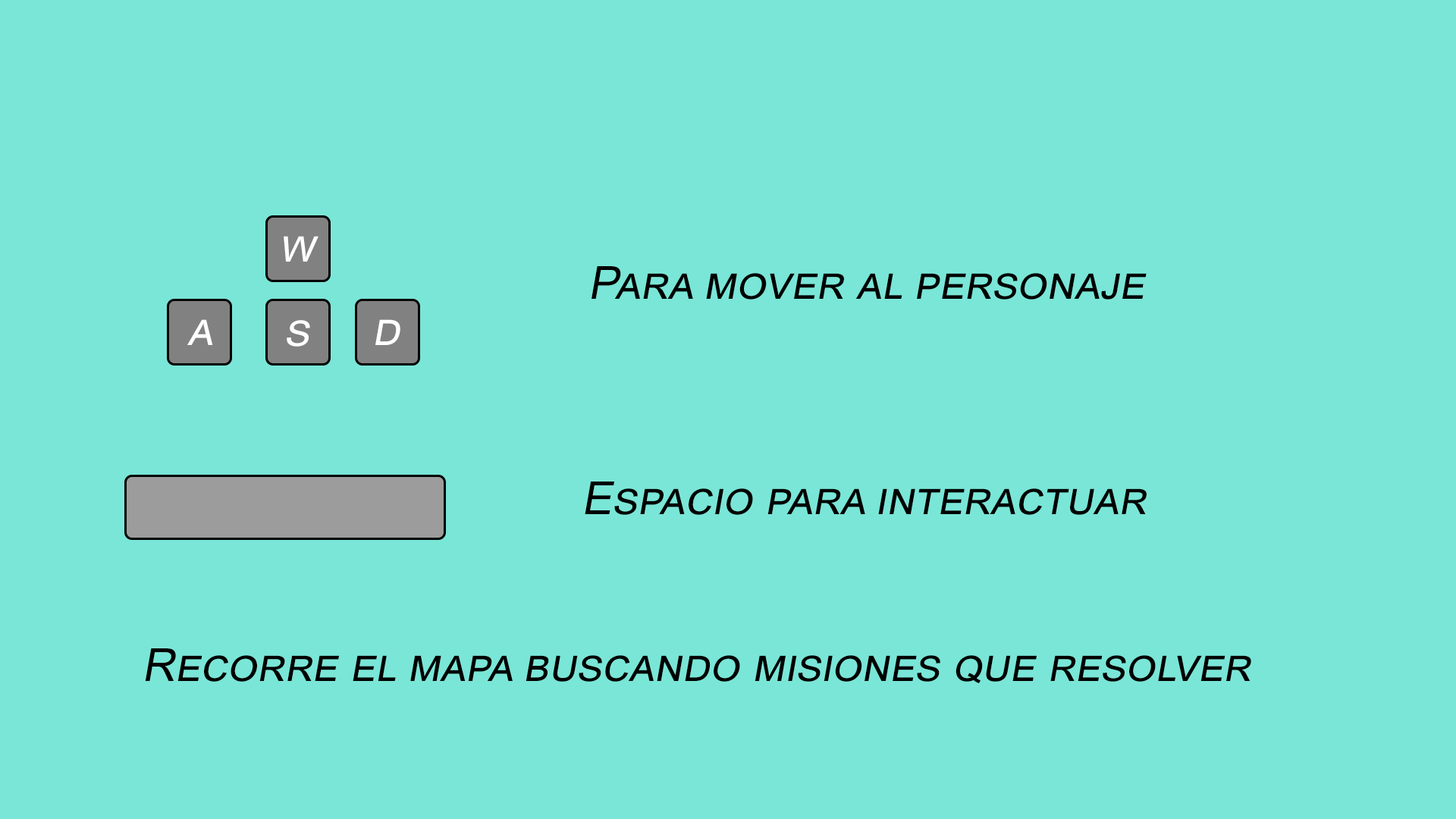
<style>
.page{position:relative;width:1456px;height:819px;background:#7ae6d7}
.page>*{position:absolute;margin:0}
.t1{font:45.5px "ArialMT";color:#ffffff;font-variant:small-caps;font-style:italic}
.t2{font:45.5px "ArialMT";color:#000000;font-variant:small-caps;font-style:italic}
</style>
<div class="page">
<p class="t1" style="left:284px;top:236px;width:34px;height:26px">w</p>
<p class="t2" style="left:591px;top:266px;width:556px;height:34px">Para mover al personaje</p>
<p class="t1" style="left:187px;top:319px;width:26px;height:26px">a</p>
<p class="t1" style="left:287px;top:320px;width:23px;height:27px">s</p>
<p class="t1" style="left:375px;top:319px;width:25px;height:26px">d</p>
<p class="t2" style="left:585px;top:482px;width:562px;height:33px">Espacio para interactuar</p>
<p class="t2" style="left:145px;top:648px;width:1106px;height:35px">Recorre el mapa buscando misiones que resolver</p>
</div>
